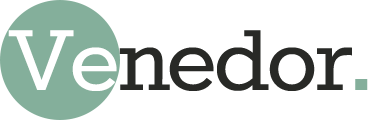
<style>
.page{position:relative;width:368px;height:120px;background:#ffffff}
.page>*{position:absolute;margin:0}
.t1{font:106px "Rokkitt";letter-spacing:-0.025em;color:#282926}
.t2{font:106px "Rokkitt";letter-spacing:-0.025em;color:#ffffff}
.t3{font:106px "Rokkitt";letter-spacing:-0.025em;color:#84af9b}
</style>
<div class="page">
<p class="t1" style="left:8px;top:30px;width:360px;height:61px"><span class="t2">Ve</span>nedor<span class="t3">.</span></p>
</div>
